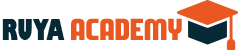
<style>
.page{position:relative;width:238px;height:50px;background:#ffffff}
.page>*{position:absolute;margin:0}
.t1{font:26.5px "DozerTwo";color:#ea5822;scale:0.64 1}
.t2{font:28.1px "GillSans-UltraBold";color:#062a35;scale:0.64 1}
</style>
<div class="page">
<p class="t1" style="left:2px;top:18px;width:180px;height:22px"><span class="t2">RUYA </span>ACADEMY</p>
</div>
